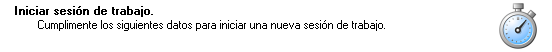
<style>
.page{position:relative;width:552px;height:52px;background:#ffffff}
.page>*{position:absolute;margin:0}
.t1{font:11.4px "MS Sans Serif";color:#000000;font-weight:bold}
.t2{font:11.4px "MS Sans Serif";color:#000000}
</style>
<div class="page">
<p class="t1" style="left:15px;top:6px;width:138px;height:11px">Iniciar sesión de trabajo.</p>
<p class="t2" style="left:38px;top:20px;width:347px;height:11px">Cumplimente los siguientes datos para iniciar una nueva sesión de trabajo.</p>
</div>
